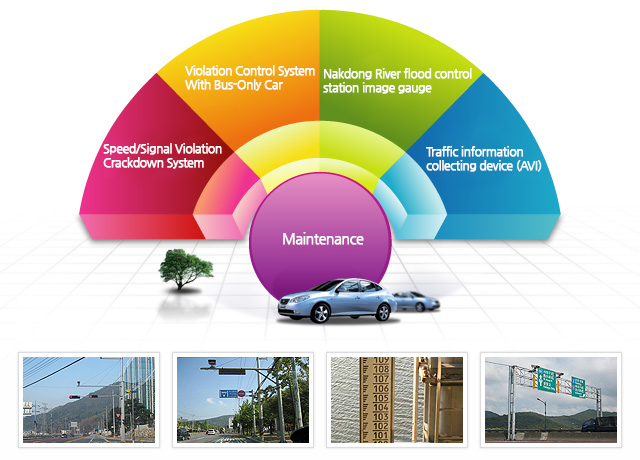
<style>
.page{position:relative;width:640px;height:460px;background:#ffffff}
.page>*{position:absolute;margin:0}
.t1{font:12px/14px "NanumGothic";letter-spacing:-0.05em;color:#ffffff;font-weight:bold}
.t2{font:14px "NanumGothic";letter-spacing:-0.05em;color:#ffffff;font-weight:bold}
</style>
<div class="page">
<p class="t1" style="left:185px;top:65px;width:130px;height:26px">Violation Control System<br>With Bus-Only Car</p>
<p class="t1" style="left:323px;top:68px;width:149px;height:26px">Nakdong River flood control<br>station image gauge</p>
<p class="t1" style="left:103px;top:143px;width:119px;height:26px">Speed/Signal Violation<br>Crackdown System</p>
<p class="t1" style="left:426px;top:146px;width:116px;height:26px">Traffic information<br>collecting device (AVI)</p>
<p class="t2" style="left:283px;top:232px;width:81px;height:13px">Maintenance</p>
</div>
